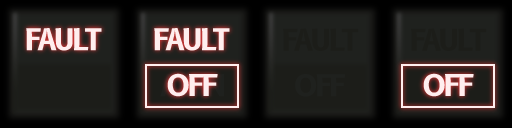
<style>
.page{position:relative;width:512px;height:128px}
.page>*{position:absolute;margin:0}
.t1{font:29.2px "B612-Bold";letter-spacing:-0.075em;color:#ffeeee}
.t2{font:29.2px "B612-Bold";letter-spacing:-0.075em;color:#1c1d19}
.t3{font:29.2px "B612-Bold";letter-spacing:-0.075em;color:#1f211e}
</style>
<div class="page">
<p class="t1" style="left:155px;top:28px;width:76px;height:23px">FAULT</p>
<p class="t2" style="left:283px;top:28px;width:76px;height:23px">FAULT</p>
<p class="t2" style="left:411px;top:28px;width:76px;height:23px">FAULT</p>
<p class="t3" style="left:295px;top:74px;width:51px;height:23px">OFF</p>
<p class="t1" style="left:423px;top:74px;width:51px;height:23px">OFF</p>
</div>
